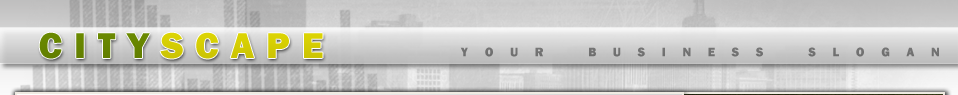
<style>
.page{position:relative;width:958px;height:95px}
.page>*{position:absolute;margin:0}
.t1{font:53px "FranklinGothic-Heavy";letter-spacing:0.32em;color:#dcd403;font-variant:small-caps}
.t2{font:53px "FranklinGothic-Heavy";letter-spacing:0.32em;color:#6a8900;font-variant:small-caps}
.t3{font:18.2px "FranklinGothic-Heavy";letter-spacing:1.3em;color:#727272;font-variant:small-caps}
</style>
<div class="page">
<p class="t1" style="left:39px;top:32px;width:284px;height:27px"><span class="t2">city</span>scape</p>
<p class="t3" style="left:460px;top:47px;width:479px;height:10px">your business slogan</p>
</div>
